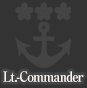
<style>
.page{position:relative;width:87px;height:88px;background:#333333}
.page>*{position:absolute;margin:0}
.t1{font:14px "RyuminPro-ExBold";letter-spacing:-0.08em;color:#fff6f2;scale:0.9 1}
</style>
<div class="page">
<p class="t1" style="left:3px;top:71px;width:81px;height:11px">Lt.-Commander</p>
</div>
